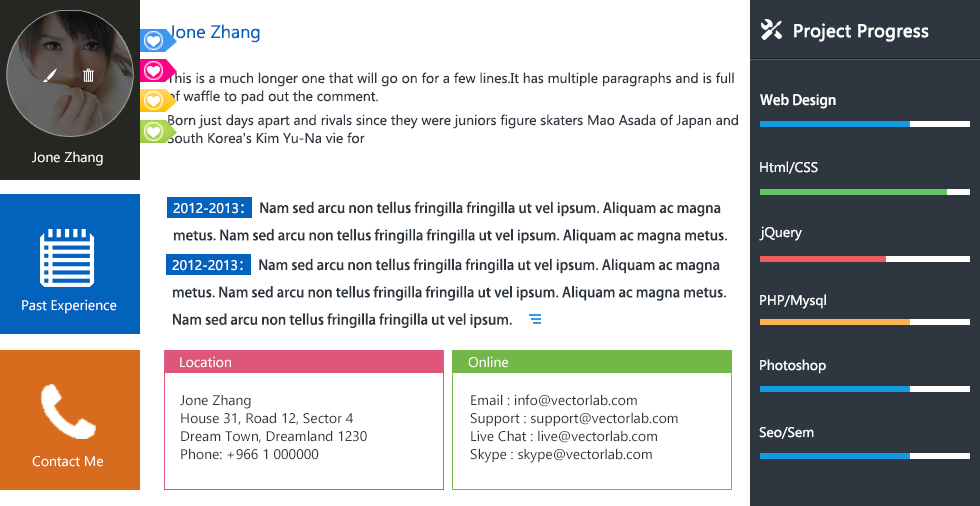
<style>
.page{position:relative;width:980px;height:506px;background:#ffffff}
.page>*{position:absolute;margin:0}
.t1{font:18px "Gadugi";color:#0262bc}
.t2{font:18px "Gadugi";color:#ffffff;font-weight:bold}
.t3{font:14px/18px "Gadugi";color:#2e363f}
.t4{font:14px "AdobeHeitiStd-Regular";color:#ffffff}
.t5{font:14px "Gadugi";color:#fbfbf8}
.t6{font:14px "Gadugi";color:#ffffff}
.t7{font:14px/18px "AdobeHeitiStd-Regular";color:#2e363f}
.t8{font:14px/18px "Gadugi";color:#ffffff}
.t9{font:14px/18px "AdobeHeitiStd-Regular";color:#ffffff}
</style>
<div class="page">
<p class="t1" style="left:169px;top:24px;width:91px;height:19px">Jone Zhang</p>
<p class="t2" style="left:794px;top:23px;width:135px;height:19px">Project Progress</p>
<p class="t3" style="left:167px;top:72px;width:567px;height:33px">This is a much longer one that will go on for a few lines.It has multiple paragraphs and is full<br>of waffle to pad out the comment.</p>
<p class="t4" style="left:760px;top:93px;width:76px;height:16px">Web Design</p>
<p class="t3" style="left:167px;top:114px;width:571px;height:30px">Born just days apart and rivals since they were juniors figure skaters Mao Asada of Japan and<br>South Korea's Kim Yu-Na vie for</p>
<p class="t5" style="left:32px;top:151px;width:71px;height:15px">Jone Zhang</p>
<p class="t6" style="left:760px;top:161px;width:58px;height:13px">Html/CSS</p>
<p class="t7" style="left:173px;top:201px;width:555px;height:43px"><span class="t8">2012-2013</span><span class="t9">：  </span>Nam sed arcu non tellus fringilla fringilla ut vel ipsum. Aliquam ac magna<br>metus. Nam sed arcu non tellus fringilla fringilla ut vel ipsum. Aliquam ac magna metus.</p>
<p class="t6" style="left:759px;top:226px;width:43px;height:15px">jQuery</p>
<p class="t7" style="left:172px;top:258px;width:555px;height:70px"><span class="t8">2012-2013</span><span class="t9">：  </span>Nam sed arcu non tellus fringilla fringilla ut vel ipsum. Aliquam ac magna<br>metus. Nam sed arcu non tellus fringilla fringilla ut vel ipsum. Aliquam ac magna metus.<br>Nam sed arcu non tellus fringilla fringilla ut vel ipsum.</p>
<p class="t6" style="left:760px;top:294px;width:66px;height:15px">PHP/Mysql</p>
<p class="t6" style="left:22px;top:299px;width:95px;height:15px">Past Experience</p>
<p class="t6" style="left:180px;top:356px;width:51px;height:12px">Location</p>
<p class="t6" style="left:468px;top:356px;width:40px;height:12px">Online</p>
<p class="t6" style="left:760px;top:359px;width:66px;height:15px">Photoshop</p>
<p class="t3" style="left:180px;top:394px;width:187px;height:66px">Jone Zhang<br>House 31, Road 12, Sector 4<br>Dream Town, Dreamland 1230<br>Phone: +966 1 000000</p>
<p class="t3" style="left:470px;top:394px;width:208px;height:69px">Email : info@vectorlab.com <br>Support : support@vectorlab.com<br>Live Chat : live@vectorlab.com<br>Skype : skype@vectorlab.com</p>
<p class="t6" style="left:759px;top:427px;width:55px;height:12px">Seo/Sem</p>
<p class="t6" style="left:32px;top:456px;width:71px;height:11px">Contact Me</p>
</div>
